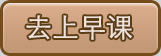
<style>
.page{position:relative;width:161px;height:56px}
.page>*{position:absolute;margin:0}
.t1{font:27px "STHeitiSC-Light";color:#efe2d9}
</style>
<div class="page">
<p class="t1" style="left:26px;top:15px;width:107px;height:25px">去上早课</p>
</div>
